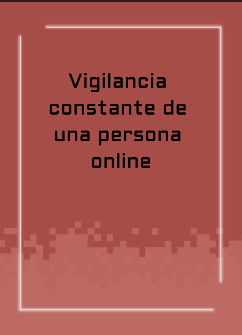
<style>
.page{position:relative;width:242px;height:335px;background:#a64d47}
.page>*{position:absolute;margin:0}
.t1{font:20px/26.7px "Aldrich-Regular";letter-spacing:0.015em;color:#000000}
</style>
<div class="page">
<p class="t1" style="left:49px;top:73px;width:137px;height:95px;text-align:center">Vigilancia <br>constante de <br>una persona <br>online</p>
</div>
